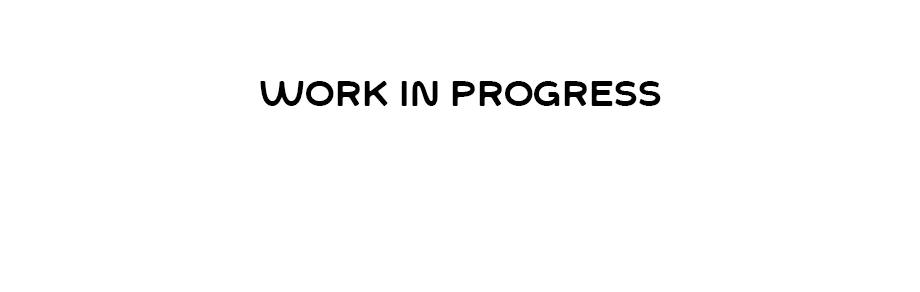
<style>
.page{position:relative;width:920px;height:292px;background:#ffffff}
.page>*{position:absolute;margin:0}
.t1{font:35.4px "SFCWosterSans-Regular";letter-spacing:0.001em;color:#000000}
</style>
<div class="page">
<p class="t1" style="left:260px;top:81px;width:401px;height:25px">Work in progress</p>
</div>
